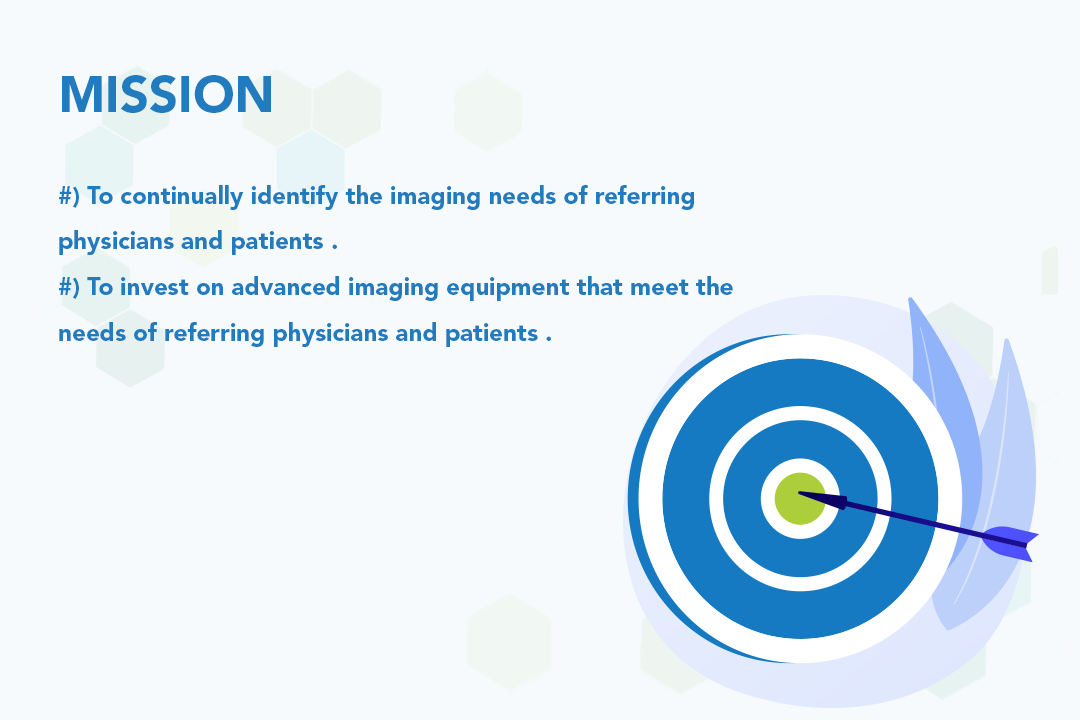
<style>
.page{position:relative;width:1080px;height:720px;background:#f6fafd}
.page>*{position:absolute;margin:0}
.t1{font:24.2px/45.9px "AvenirLTStd-Black";color:#207cbf}
.t2{font:50.2px/45.9px "AvenirLTStd-Black";color:#207cbf}
</style>
<div class="page">
<p class="t1" style="left:59px;top:75px;width:674px;height:272px"><span class="t2">MISSION<br><br></span>#) To continually identify the imaging needs of referring         physicians and patients .<br>#) To invest on advanced imaging equipment that meet the needs of referring physicians and patients .<br>#) To recruit , train and retain talented professionals that can meet the need of our referring physicians and patients<br>To deploy quality management systems and processes that meet the needs of our customers.</p>
</div>
